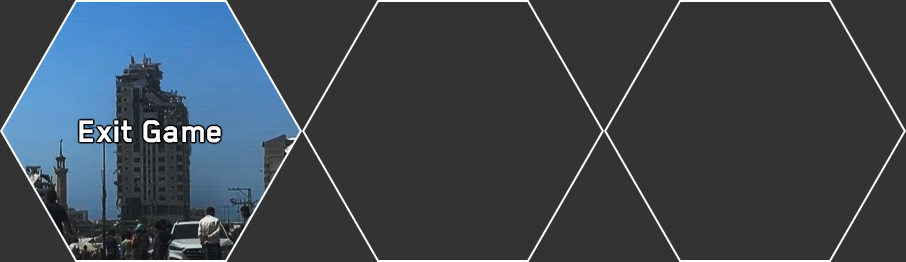
<style>
.page{position:relative;width:906px;height:262px;background:#333333}
.page>*{position:absolute;margin:0}
.t1{font:36px "BlenderPro-Bold";color:#ffffff}
</style>
<div class="page">
<p class="t1" style="left:79px;top:120px;width:142px;height:23px">Exit Game</p>
</div>
